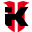
<style>
.page{position:relative;width:32px;height:32px;background:#ffffff}
.page>*{position:absolute;margin:0}
.t1{font:30px "Renegado";letter-spacing:0.01em;color:#000000}
</style>
<div class="page">
<p class="t1" style="left:5px;top:7px;width:24px;height:19px">K</p>
</div>
